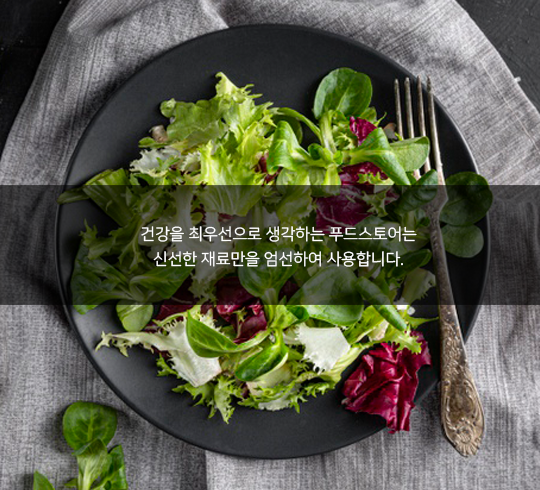
<style>
.page{position:relative;width:540px;height:490px}
.page>*{position:absolute;margin:0}
.t1{font:16px/25px "NanumSquareR";color:#ffffff}
</style>
<div class="page">
<p class="t1" style="left:141px;top:226px;width:276px;height:41px;text-align:center">건강을 최우선으로 생각하는 푸드스토어는<br>신선한 재료만을 엄선하여 사용합니다.</p>
</div>
